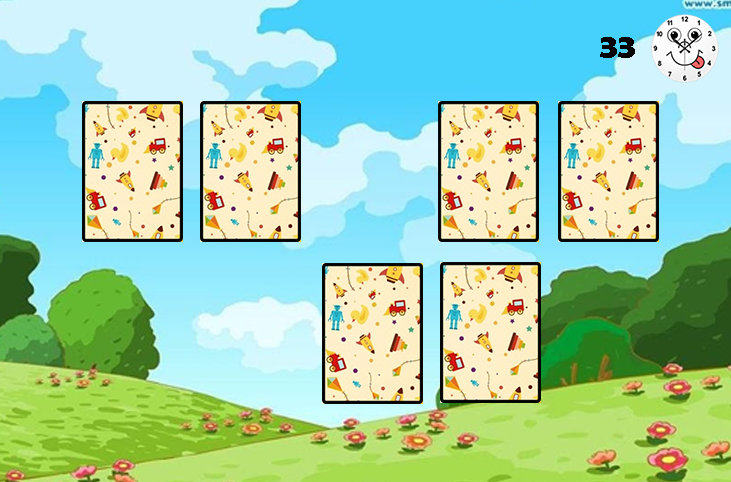
<style>
.page{position:relative;width:731px;height:482px}
.page>*{position:absolute;margin:0}
.t1{font:36px "BerlinSansFBDemi-Bold";color:#000000}
</style>
<div class="page">
<p class="t1" style="left:600px;top:37px;width:35px;height:21px">33</p>
</div>
